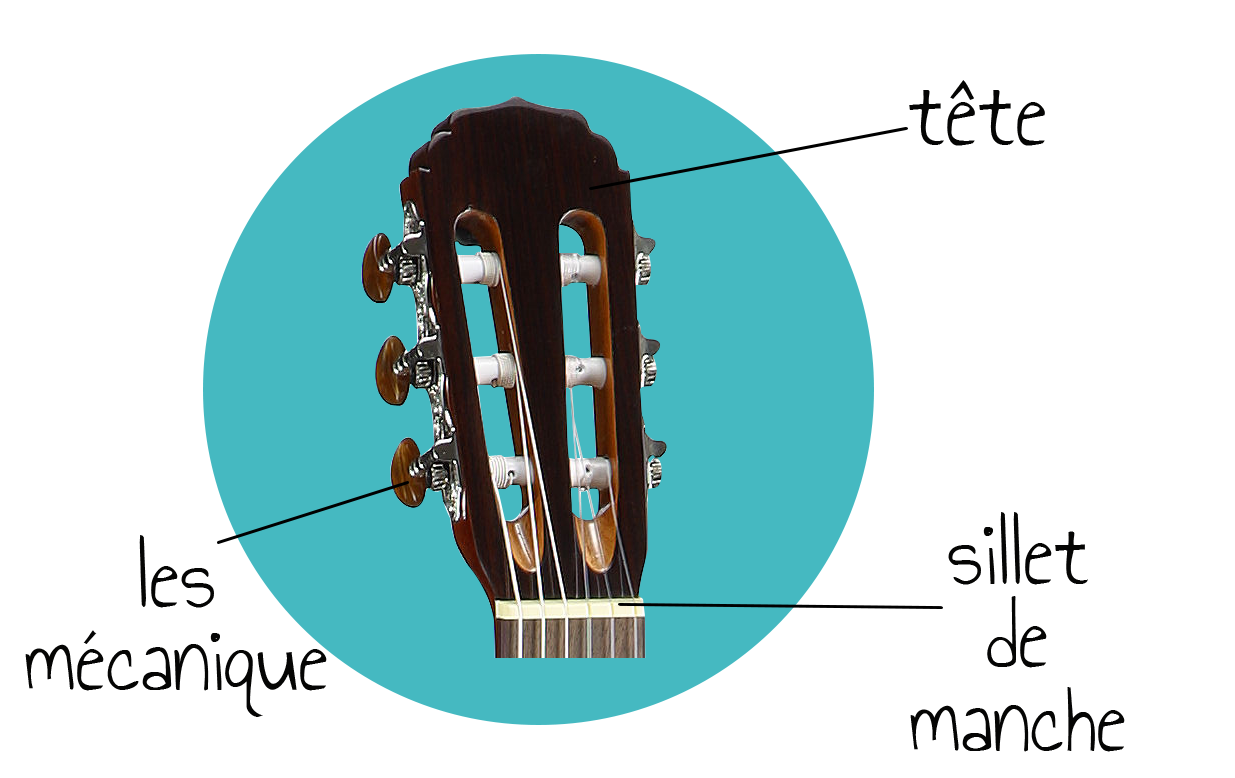
<style>
.page{position:relative;width:1235px;height:778px;background:#ffffff}
.page>*{position:absolute;margin:0}
.t1{font:75px "AnnieUseYourTelescope";color:#050504}
.t2{font:70.8px/83.3px "AnnieUseYourTelescope";color:#050504}
</style>
<div class="page">
<p class="t1" style="left:909px;top:80px;width:136px;height:66px">tête</p>
<p class="t2" style="left:910px;top:512px;width:215px;height:240px;text-align:center">sillet<br>de<br>manche</p>
<p class="t2" style="left:25px;top:535px;width:302px;height:182px;text-align:center">les<br>mécanique</p>
</div>
